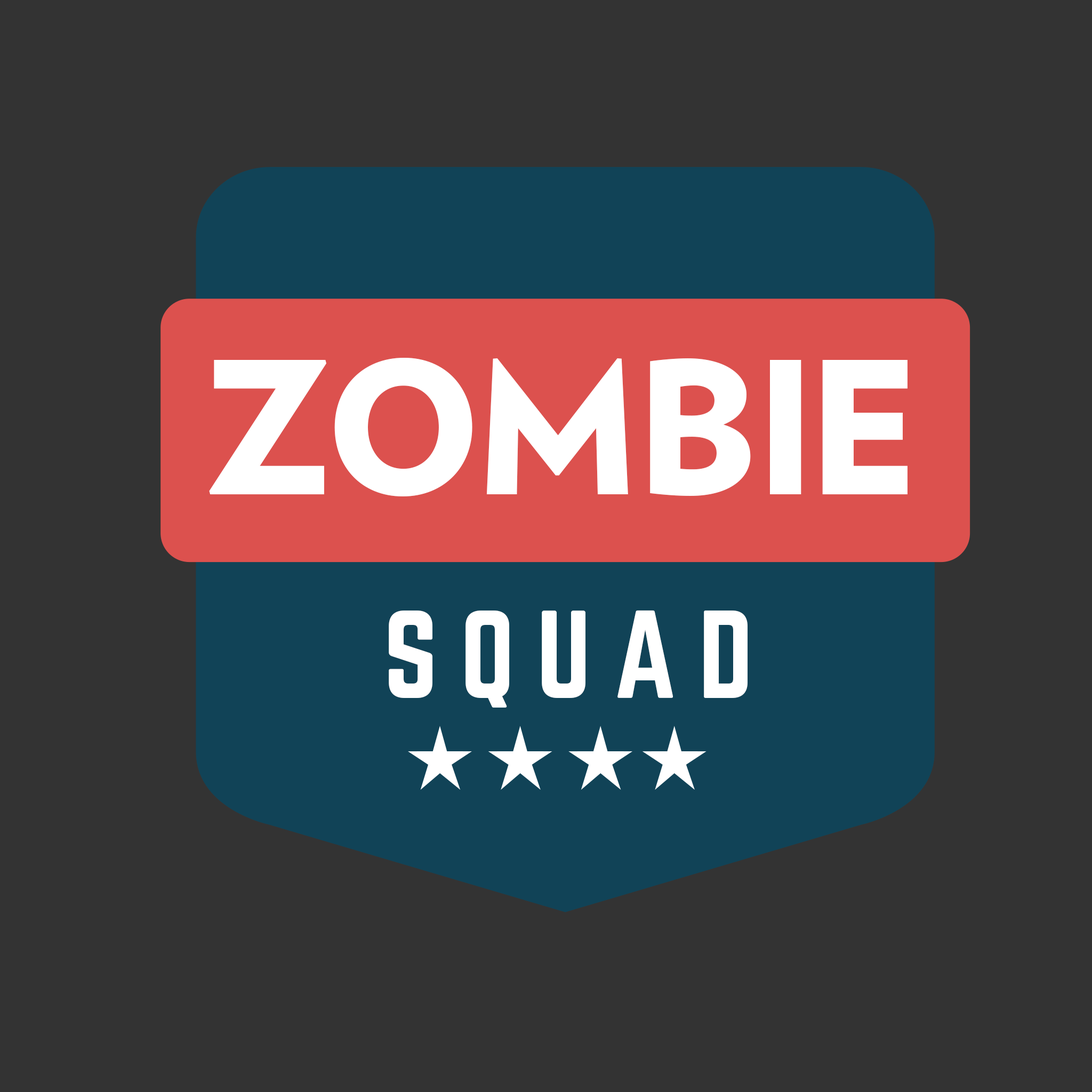
<style>
.page{position:relative;width:1092px;height:1092px;background:#333333}
.page>*{position:absolute;margin:0}
.t1{font:183.1px "Verlag-Black";letter-spacing:0.073em;color:#ffffff}
.t2{font:109.2px "Norwester-Regular";letter-spacing:0.2em;color:#ffffff;text-transform:uppercase}
</style>
<div class="page">
<p class="t1" style="left:209px;top:358px;width:698px;height:138px">ZOMBIE</p>
<p class="t2" style="left:389px;top:610px;width:359px;height:98px">Squad</p>
</div>
